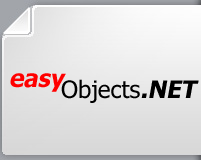
<style>
.page{position:relative;width:201px;height:160px}
.page>*{position:absolute;margin:0}
.t1{font:23.9px "Tahoma-Bold";color:#ff0000;font-style:italic}
.t2{font:23.9px "Tahoma";color:#000000}
.t3{font:23.9px "Tahoma-Bold";color:#000000;font-style:italic}
</style>
<div class="page">
<p class="t1" style="left:10px;top:73px;width:56px;height:19px">easy</p>
<p class="t2" style="left:61px;top:79px;width:79px;height:24px">Objects</p>
<p class="t3" style="left:141px;top:80px;width:58px;height:18px">.NET</p>
</div>
